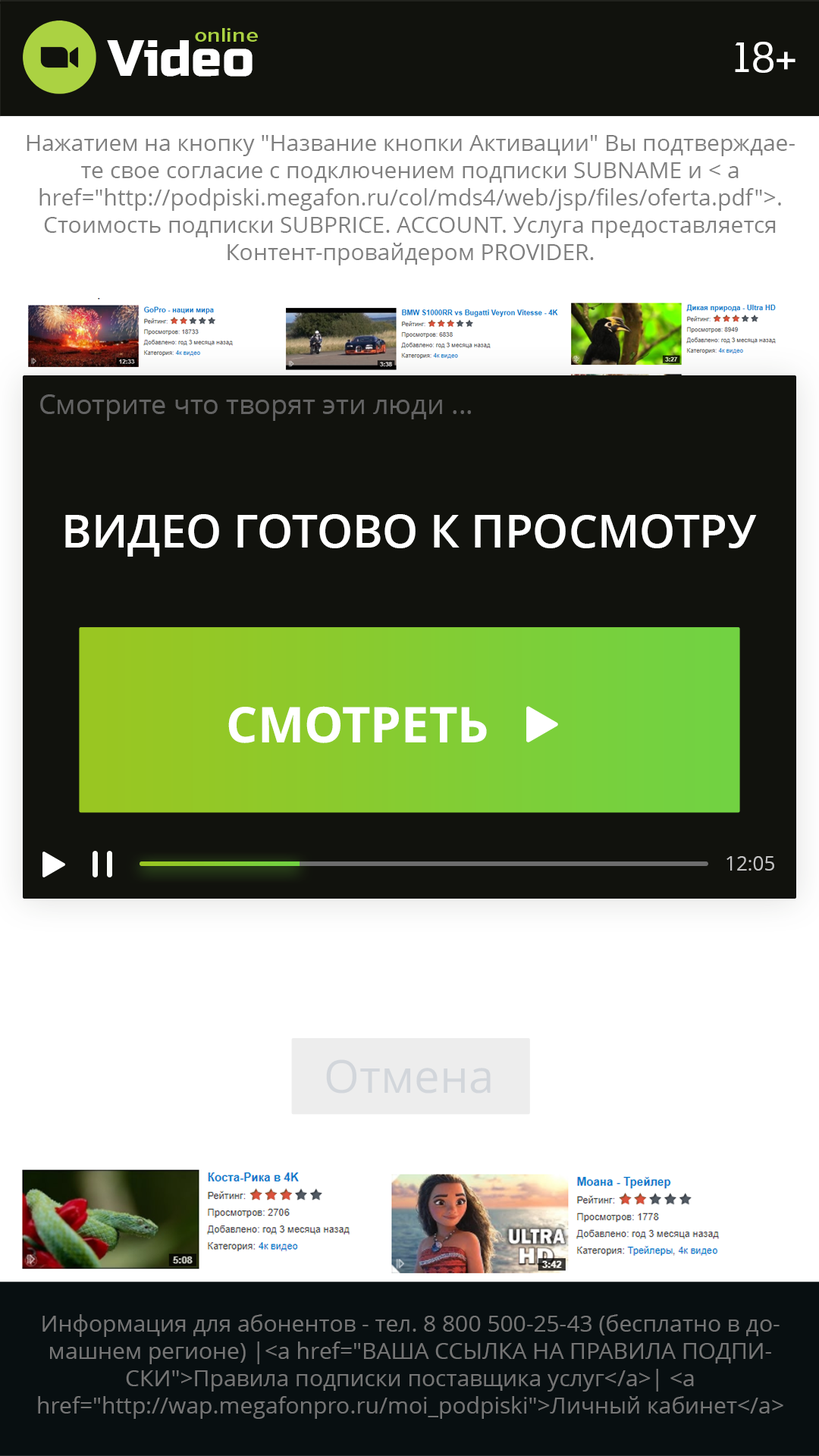
<style>
.page{position:relative;width:819px;height:1456px;background:#ffffff}
.page>*{position:absolute;margin:0}
.t1{font:19.9px "ProximaNovaCond-Semibold";color:#abd242;scale:1.37 1}
.t2{font:50.7px "RussoOne";color:#ffffff}
.t3{font:41.7px "MintSpirit-Regular";color:#ffffff;text-transform:uppercase;scale:1.15 1}
.t4{font:22.7px/27.3px "OpenSans";color:#7f7f7f}
.t5{font:27.3px "OpenSans";color:#636363}
.t6{font:45.5px "OpenSans-Semibold";color:#ffffff;text-transform:uppercase}
.t7{font:49.3px "OpenSans-Bold";color:#ffffff;text-transform:uppercase}
.t8{font:19.8px "OpenSans";color:#c3c3c3}
.t9{font:45.5px "OpenSans";color:#d2d6db}
.t10{font:22.7px/27.3px "OpenSans";color:#757575}
</style>
<div class="page">
<p class="t1" style="left:195px;top:28px;width:63px;height:14px">online</p>
<p class="t2" style="left:107px;top:40px;width:146px;height:37px">Video</p>
<p class="t3" style="left:735px;top:42px;width:60px;height:31px">18+</p>
<p class="t4" style="left:27px;top:135px;width:768px;height:130px;text-align:center">Нажатием на кнопку "Название кнопки Активации" Вы подтверждаете свое согласие с подключением подписки SUBNAME и &lt; a href="http://podpiski.megafon.ru/col/mds4/web/jsp/files/oferta.pdf"&gt;. Стоимость подписки SUBPRICE. ACCOUNT. Услуга предоставляется Контент-провайдером PROVIDER.</p>
<p class="t5" style="left:40px;top:394px;width:431px;height:27px">Смотрите что творят эти люди ...</p>
<p class="t6" style="left:65px;top:514px;width:692px;height:43px">Видео готово к просмотру</p>
<p class="t7" style="left:228px;top:706px;width:259px;height:37px">Смотреть</p>
<p class="t8" style="left:726px;top:856px;width:48px;height:15px">12:05</p>
<p class="t9" style="left:326px;top:1059px;width:165px;height:35px">Отмена</p>
<p class="t10" style="left:38px;top:1314px;width:745px;height:105px;text-align:center">Информация для абонентов - тел. 8 800 500-25-43 (бесплатно в домашнем регионе) |&lt;a href="ВАША ССЫЛКА НА ПРАВИЛА ПОДПИСКИ"&gt;Правила подписки поставщика услуг&lt;/a&gt;| &lt;a href="http://wap.megafonpro.ru/moi_podpiski"&gt;Личный кабинет&lt;/a&gt;</p>
</div>
